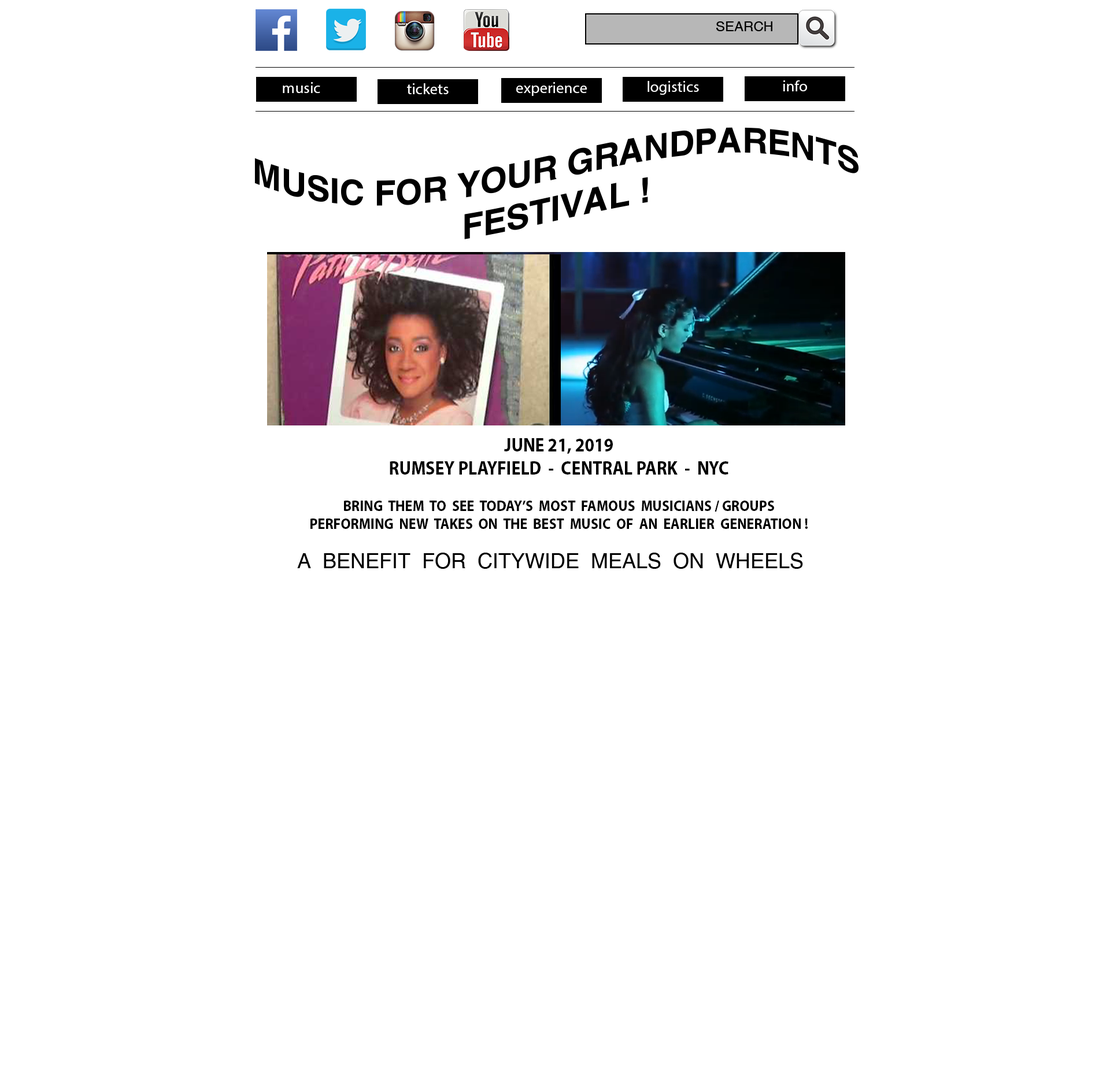
<style>
.page{position:relative;width:1110px;height:1074px;background:#ffffff}
.page>*{position:absolute;margin:0}
.t1{font:13.9px "Helvetica";color:#000000}
.t2{font:15.6px "MyriadPro-Regular";color:#fefefe}
.t3{font:34.7px "Helvetica-Bold";color:#000000}
.t4{font:13.9px "Helvetica-Oblique";color:#000000}
.t5{font:15.2px "MyriadPro-Bold";color:#000000;scale:0.91 1}
.t6{font:15.2px "MyriadPro-Regular";color:#000000;scale:0.91 1}
.t7{font:19px "MyriadPro-Bold";color:#000000;scale:0.91 1}
.t8{font:20.8px "Helvetica";color:#000000}
</style>
<div class="page">
<p class="t1" style="left:716px;top:21px;width:56px;height:10px">SEARCH</p>
<p class="t2" style="left:283px;top:82px;width:37px;height:11px">music</p>
<p class="t2" style="left:407px;top:83px;width:42px;height:11px">tickets</p>
<p class="t2" style="left:516px;top:82px;width:71px;height:14px">experience</p>
<p class="t2" style="left:648px;top:81px;width:51px;height:14px">logistics</p>
<p class="t2" style="left:783px;top:80px;width:24px;height:11px">info</p>
<p class="t3" style="left:254px;top:127px;width:605px;height:112px;text-align:center"><span class="t4"><br><br><br></span>MUSIC FOR YOUR GRANDPARENTS<br>FESTIVAL !</p>
<p class="t5" style="left:310px;top:438px;width:498px;height:91px;text-align:center"><span class="t6"><br></span><span class="t7">JUNE 21, 2019<br>RUMSEY PLAYFIELD  -  CENTRAL PARK  -  NYC<br></span><br>BRING  THEM  TO  SEE  TODAY’S  MOST  FAMOUS  MUSICIANS / GROUPS <br>PERFORMING  NEW  TAKES  ON  THE  BEST  MUSIC  OF  AN  EARLIER  GENERATION !</p>
<p class="t8" style="left:297px;top:553px;width:506px;height:16px"><span class="t1"><br></span>A  BENEFIT  FOR  CITYWIDE  MEALS  ON  WHEELS</p>
</div>
